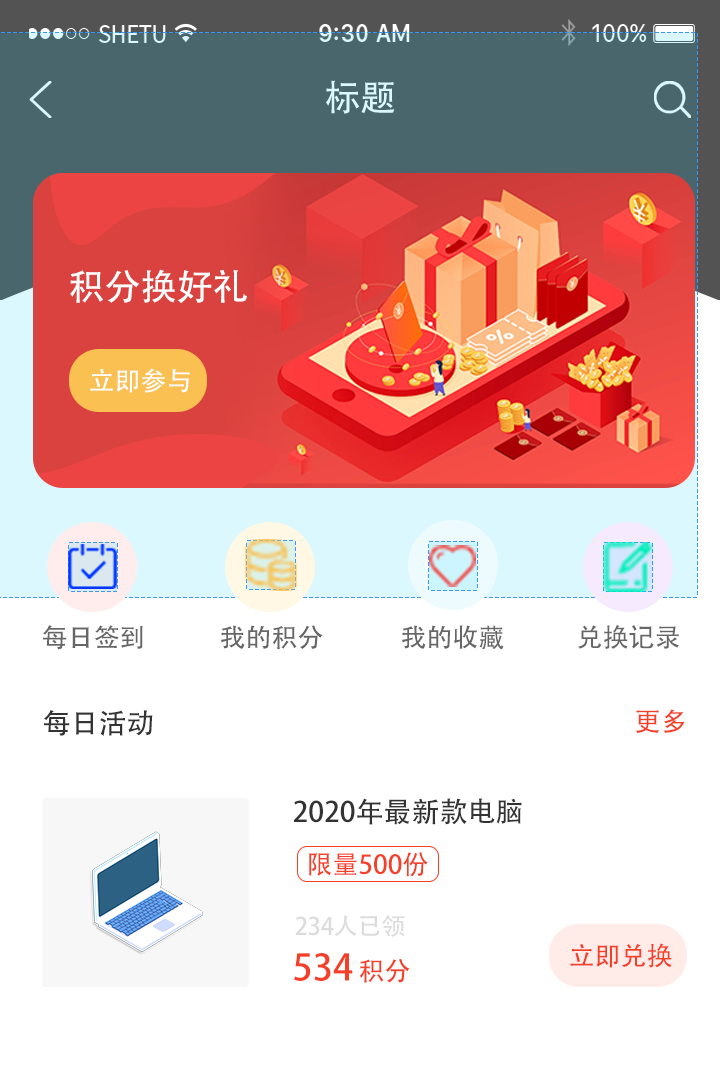
<style>
.page{position:relative;width:720px;height:1080px;background:#ffffff}
.page>*{position:absolute;margin:0}
.t1{font:36px "AdobeHeitiStd-Regular";color:#ffffff}
.t2{font:26px "AdobeHeitiStd-Regular";color:#ffffff}
.t3{font:26px "AdobeHeitiStd-Regular";color:#666666}
.t4{font:28px "AdobeHeitiStd-Regular";color:#333333}
.t5{font:26px "AdobeHeitiStd-Regular";color:#f54029}
.t6{font:24px "AdobeHeitiStd-Regular";color:#dcdcdc}
.t7{font:36px "AdobeHeitiStd-Regular";color:#f54029}
</style>
<div class="page">
<p class="t1" style="left:70px;top:269px;width:177px;height:34px">积分换好礼</p>
<p class="t2" style="left:90px;top:368px;width:100px;height:25px">立即参与</p>
<p class="t3" style="left:43px;top:625px;width:100px;height:25px">每日签到</p>
<p class="t3" style="left:220px;top:625px;width:103px;height:24px">我的积分</p>
<p class="t3" style="left:401px;top:625px;width:103px;height:25px">我的收藏</p>
<p class="t3" style="left:578px;top:625px;width:101px;height:24px">兑换记录</p>
<p class="t4" style="left:44px;top:709px;width:109px;height:27px">每日活动</p>
<p class="t5" style="left:635px;top:709px;width:50px;height:24px">更多</p>
<p class="t4" style="left:294px;top:798px;width:228px;height:27px">2020年最新款电脑</p>
<p class="t5" style="left:309px;top:852px;width:119px;height:25px">限量500份</p>
<p class="t6" style="left:295px;top:915px;width:110px;height:22px">234人已领</p>
<p class="t7" style="left:294px;top:953px;width:59px;height:28px">534</p>
<p class="t5" style="left:570px;top:943px;width:102px;height:25px">立即兑换</p>
<p class="t5" style="left:359px;top:959px;width:51px;height:24px">积分</p>
</div>
